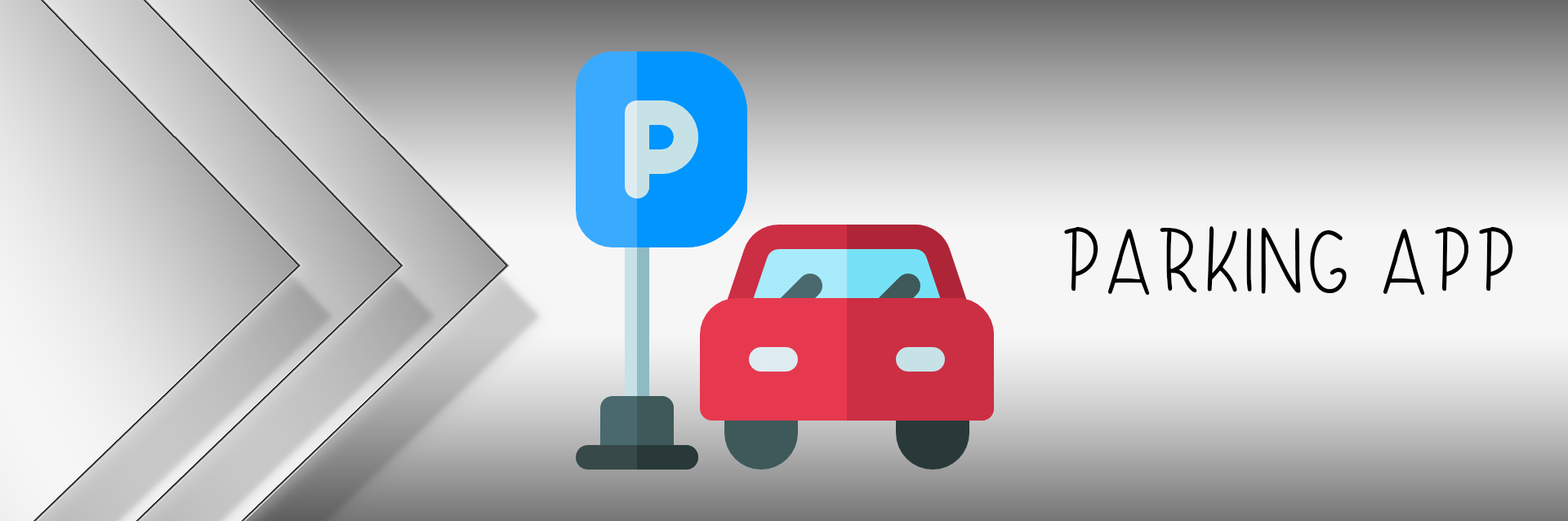
<style>
.page{position:relative;width:1568px;height:521px}
.page>*{position:absolute;margin:0}
.t1{font:107.8px "Melonhunter";letter-spacing:-0.01em;color:#000000}
</style>
<div class="page">
<p class="t1" style="left:1064px;top:226px;width:449px;height:69px">PARKING APP</p>
</div>
